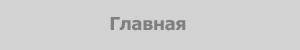
<style>
.page{position:relative;width:300px;height:50px;background:#d2d2d2}
.page>*{position:absolute;margin:0}
.t1{font:18px "Tahoma-Bold";color:#7f7f7f}
</style>
<div class="page">
<p class="t1" style="left:110px;top:17px;width:76px;height:14px">Главная</p>
</div>
